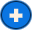
<style>
.page{position:relative;width:32px;height:30px;background:#0a75e1}
.page>*{position:absolute;margin:0}
.t1{font:24px "Herald";color:#fdf1e1}
</style>
<div class="page">
<p class="t1" style="left:9px;top:8px;width:14px;height:14px">+</p>
</div>
